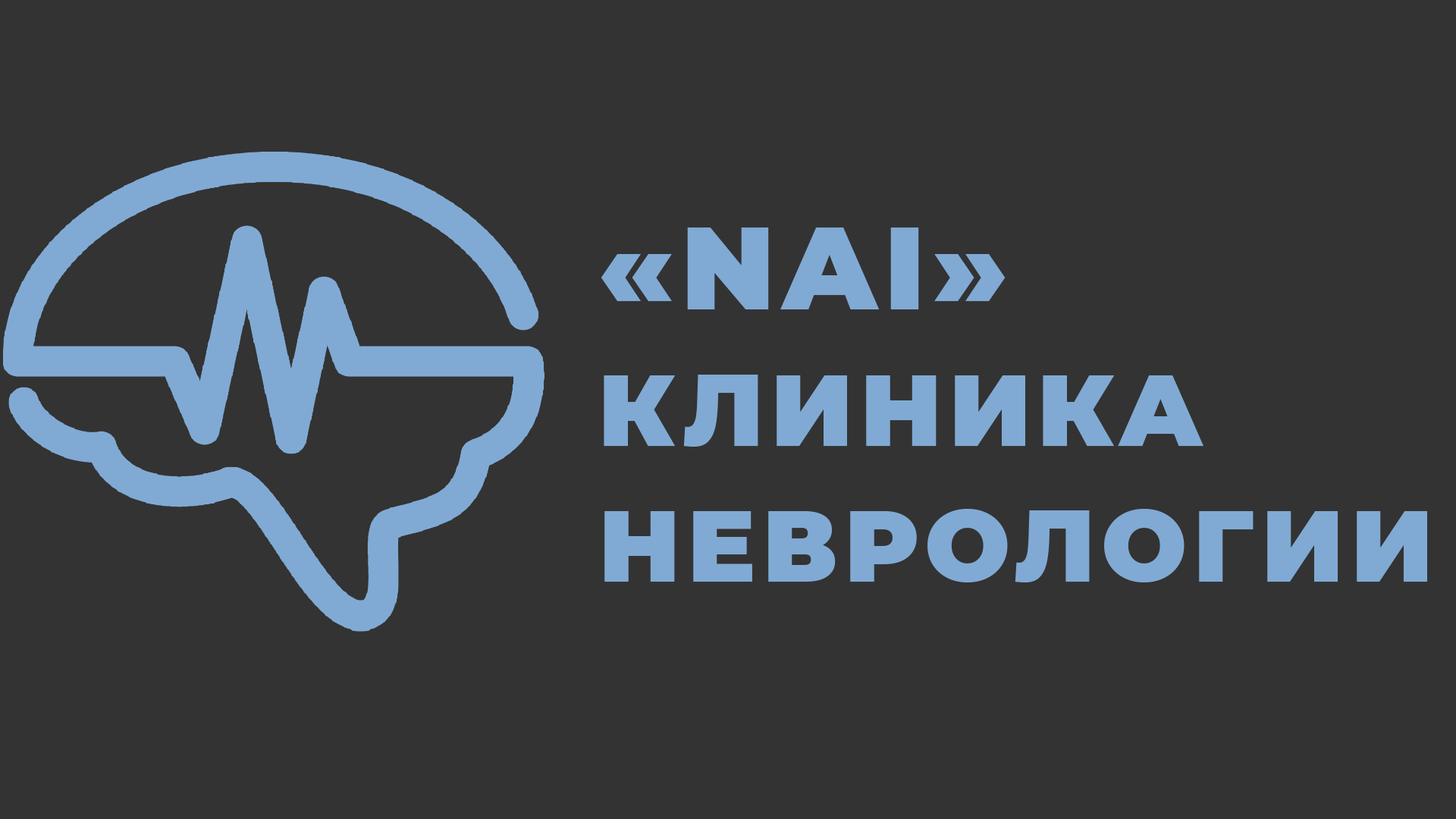
<style>
.page{position:relative;width:1456px;height:819px;background:#333333}
.page>*{position:absolute;margin:0}
.t1{font:101.1px/135.9px "Montserrat-Black";letter-spacing:0.064em;color:#80aad4}
.t2{font:116.9px/135.9px "Montserrat-Black";letter-spacing:0.064em;color:#80aad4}
</style>
<div class="page">
<p class="t1" style="left:601px;top:227px;width:826px;height:355px"><span class="t2">«NAI»<br></span>КЛИНИКА <br>НЕВРОЛОГИИ</p>
</div>
